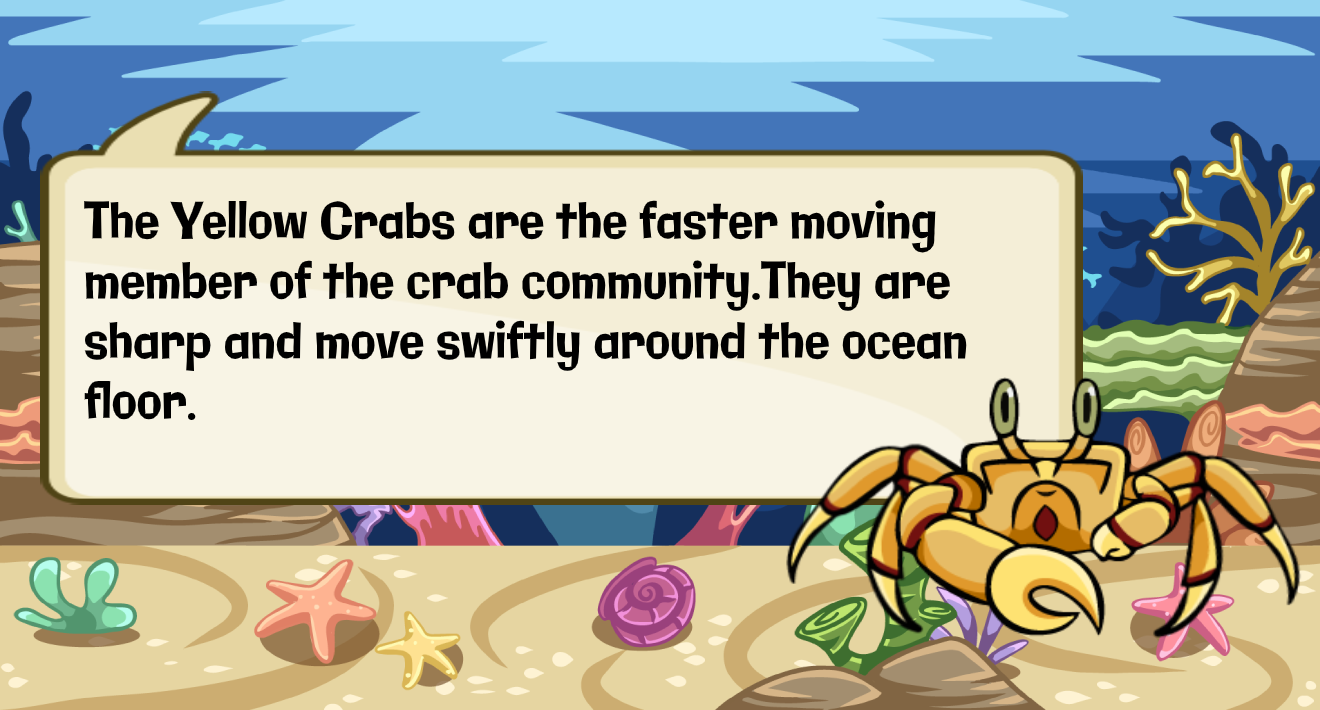
<style>
.page{position:relative;width:1320px;height:710px}
.page>*{position:absolute;margin:0}
.t1{font:50.1px "Galindo-Regular";color:#000000;scale:0.82 1}
</style>
<div class="page">
<p class="t1" style="left:84px;top:200px;width:883px;height:220px">The Yellow Crabs are the faster moving <br>member of the crab community.They are <br>sharp and move swiftly around the ocean<br>floor.</p>
</div>
